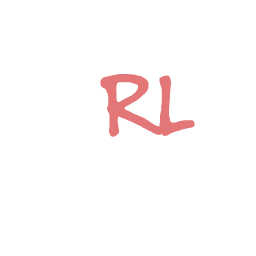
<style>
.page{position:relative;width:256px;height:256px;background:#ffffff}
.page>*{position:absolute;margin:0}
.t1{font:100px "BuxtonSketch";color:#e37676}
</style>
<div class="page">
<p class="t1" style="left:100px;top:74px;width:95px;height:63px">RL</p>
</div>
